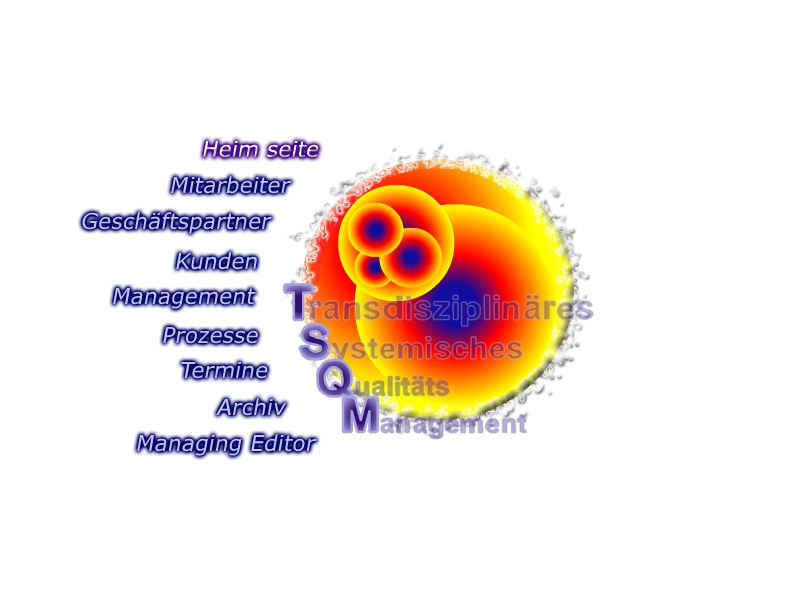
<style>
.page{position:relative;width:800px;height:600px;background:#ffffff}
.page>*{position:absolute;margin:0}
.t1{font:22px "Verdana";font-style:italic}
.t2{font:22px "Verdana";color:#c1c1ff;font-style:italic}
</style>
<div class="page">
<p class="t1" style="left:203px;top:141px;width:116px;height:17px">Heim seite</p>
<p class="t2" style="left:171px;top:176px;width:120px;height:18px">Mitarbeiter</p>
<p class="t2" style="left:82px;top:212px;width:190px;height:22px">Geschäftspartner</p>
<p class="t2" style="left:176px;top:252px;width:81px;height:18px">Kunden</p>
<p class="t2" style="left:113px;top:288px;width:143px;height:21px">Management</p>
<p class="t2" style="left:163px;top:327px;width:95px;height:17px">Prozesse</p>
<p class="t2" style="left:181px;top:362px;width:87px;height:17px">Termine</p>
<p class="t2" style="left:216px;top:398px;width:70px;height:18px">Archiv</p>
<p class="t2" style="left:137px;top:434px;width:180px;height:22px">Managing Editor</p>
</div>
